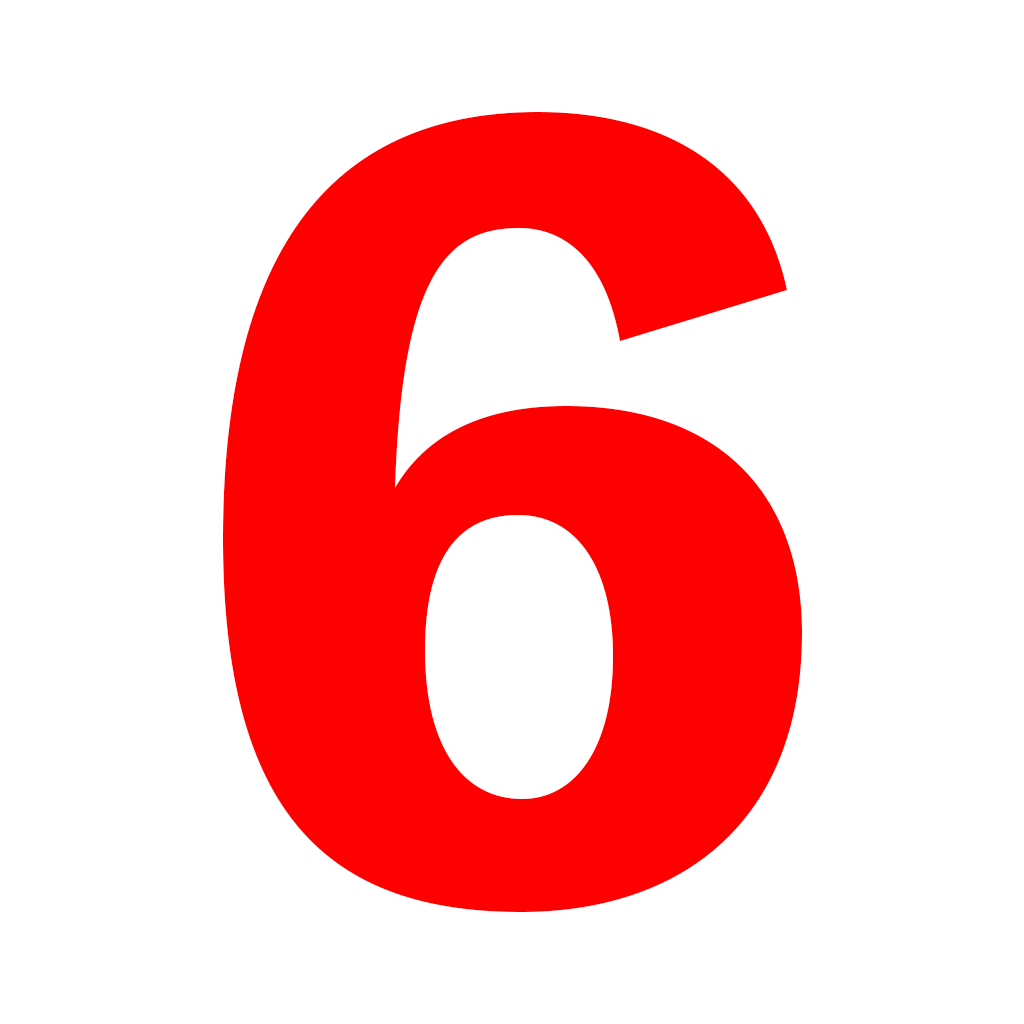
<style>
.page{position:relative;width:1024px;height:1024px;background:#ffffff}
.page>*{position:absolute;margin:0}
.t1{font:1000px "ToppanBunkyuMidashiGothicStdN-ExtraBold";color:#ff0000}
</style>
<div class="page">
<p class="t1" style="left:223px;top:112px;width:579px;height:800px">6</p>
</div>
